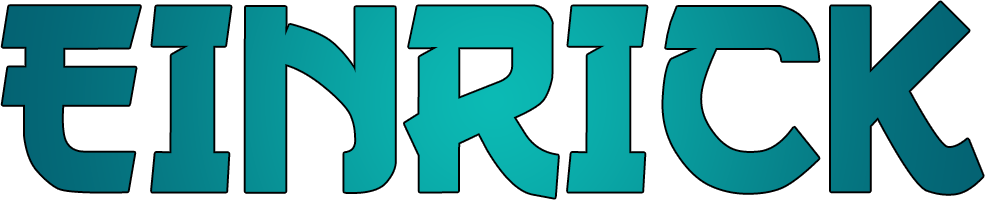
<style>
.page{position:relative;width:985px;height:200px;background:#ffffff}
.page>*{position:absolute;margin:0}
.t1{font:277.5px "GangofThree";color:#000000;text-transform:uppercase}
</style>
<div class="page">
<p class="t1" style="left:2px;top:2px;width:981px;height:196px">einrick</p>
</div>
